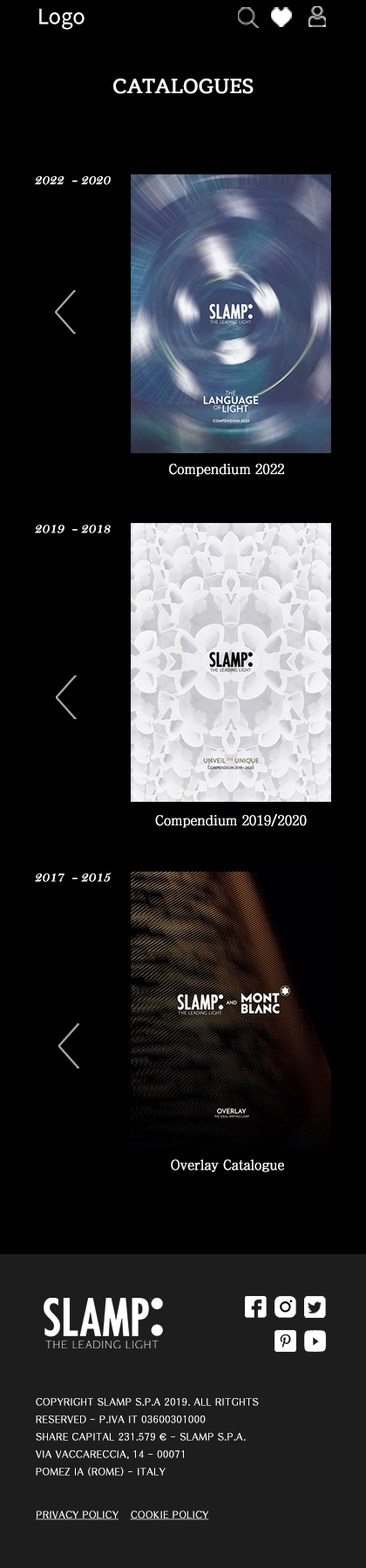
<style>
.page{position:relative;width:366px;height:1568px;background:#000000}
.page>*{position:absolute;margin:0}
.t1{font:20.9px "NotoSansKR-Regular";color:#ffffff}
.t2{font:20.9px "RIDIBatang";color:#ffffff;font-weight:bold}
.t3{font:13.9px "BellMT";color:#ffffff;font-weight:bold;font-style:italic}
.t4{font:13.9px "ChosunilboNM";color:#ffffff;font-weight:bold}
.t5{font:9.6px/17.4px "H2gprM";color:#ffffff;font-weight:bold}
.t6{font:9.6px/17.4px "Gulim";color:#ffffff;font-weight:bold}
.t7{font:9.6px "H2gprM";color:#ffffff;font-weight:bold;text-decoration:underline}
</style>
<div class="page">
<p class="t1" style="left:39px;top:9px;width:46px;height:21px">Logo</p>
<p class="t2" style="left:113px;top:78px;width:141px;height:16px">CATALOGUES</p>
<p class="t3" style="left:35px;top:176px;width:76px;height:9px">2022  - 2020</p>
<p class="t4" style="left:169px;top:464px;width:115px;height:13px">Compendium 2022</p>
<p class="t3" style="left:35px;top:525px;width:76px;height:8px">2019  - 2018</p>
<p class="t4" style="left:155px;top:814px;width:152px;height:14px">Compendium 2019/2020</p>
<p class="t3" style="left:35px;top:872px;width:76px;height:10px">2017  - 2015</p>
<p class="t4" style="left:171px;top:1159px;width:113px;height:13px">Overlay Catalogue</p>
<p class="t5" style="left:36px;top:1398px;width:223px;height:78px;text-align:center">COPYRIGHT SLAMP S.P.A 2019. ALL RITGHTS <br>RESERVED - P.IVA IT 03600301000  <br>SHARE CAPITAL 231.579 <span class="t6">€ </span>- SLAMP S.P.A. <br>VIA VACCARECCIA, 14 - 00071 <br>POMEZ IA (ROME) - ITALY</p>
<p class="t7" style="left:36px;top:1510px;width:83px;height:10px">PRIVACY POLICY</p>
<p class="t7" style="left:130px;top:1510px;width:79px;height:10px">COOKIE POLICY</p>
</div>
